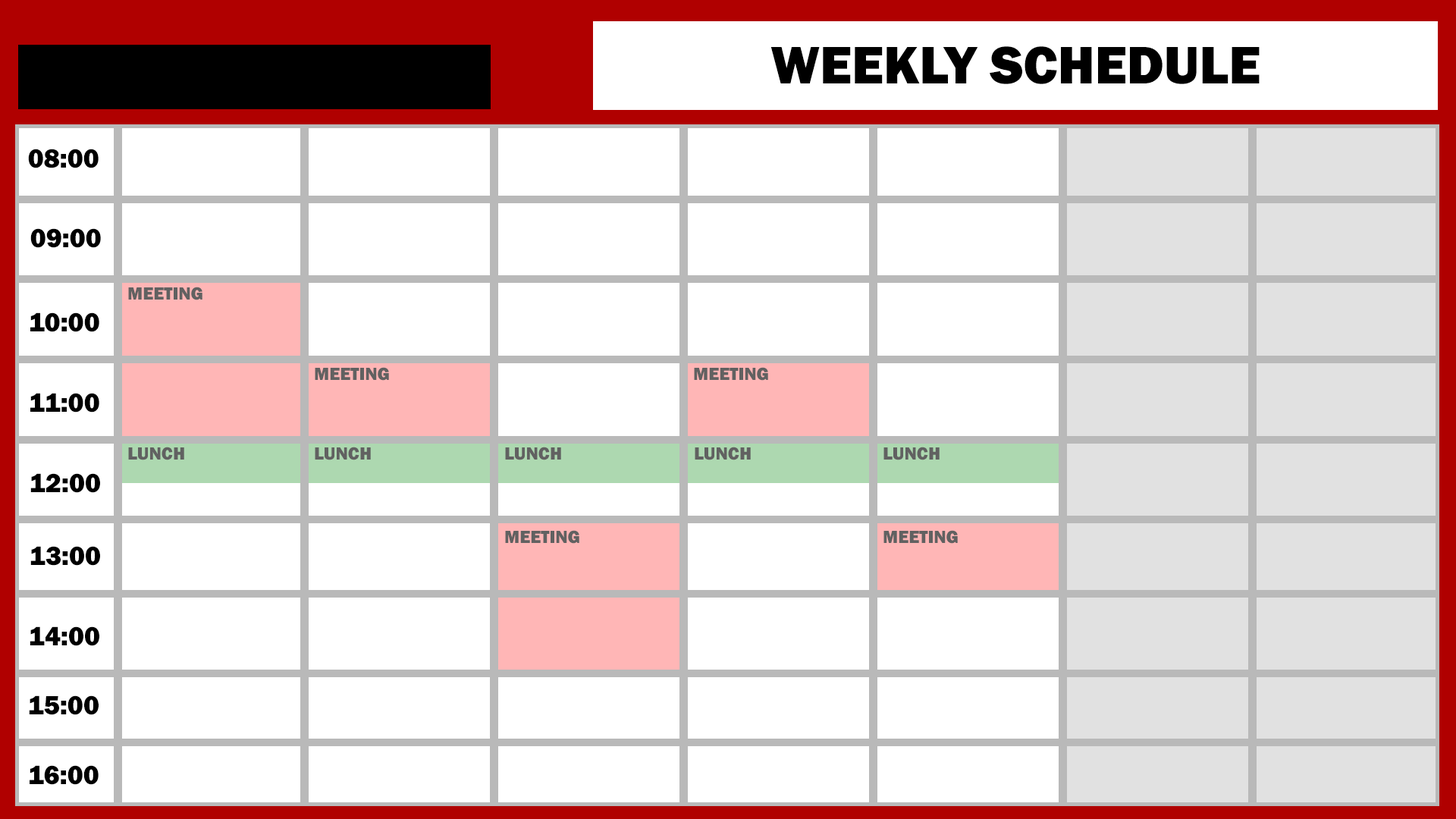
<style>
.page{position:relative;width:1456px;height:819px;background:#ffffff}
.page>*{position:absolute;margin:0}
.t1{font:54.6px "FranklinGothic-Heavy";color:#000000}
.t2{font:27.3px "FranklinGothic-Heavy";color:#000000}
.t3{font:18.2px "FranklinGothic-Heavy";color:#616161}
</style>
<div class="page">
<p class="t1" style="left:770px;top:46px;width:490px;height:38px">WEEKLY SCHEDULE</p>
<p class="t2" style="left:28px;top:149px;width:71px;height:19px">08:00</p>
<p class="t2" style="left:30px;top:228px;width:71px;height:20px">09:00</p>
<p class="t3" style="left:128px;top:287px;width:74px;height:13px">MEETING</p>
<p class="t2" style="left:30px;top:312px;width:69px;height:20px">10:00</p>
<p class="t3" style="left:315px;top:367px;width:74px;height:14px">MEETING</p>
<p class="t3" style="left:694px;top:367px;width:74px;height:14px">MEETING</p>
<p class="t2" style="left:30px;top:393px;width:69px;height:20px">11:00</p>
<p class="t3" style="left:128px;top:447px;width:56px;height:13px">LUNCH</p>
<p class="t3" style="left:315px;top:447px;width:56px;height:13px">LUNCH</p>
<p class="t3" style="left:505px;top:447px;width:56px;height:13px">LUNCH</p>
<p class="t3" style="left:695px;top:447px;width:56px;height:13px">LUNCH</p>
<p class="t3" style="left:883px;top:447px;width:57px;height:13px">LUNCH</p>
<p class="t2" style="left:30px;top:473px;width:70px;height:20px">12:00</p>
<p class="t3" style="left:505px;top:530px;width:74px;height:14px">MEETING</p>
<p class="t3" style="left:883px;top:530px;width:75px;height:14px">MEETING</p>
<p class="t2" style="left:30px;top:546px;width:70px;height:20px">13:00</p>
<p class="t2" style="left:30px;top:626px;width:69px;height:20px">14:00</p>
<p class="t2" style="left:29px;top:695px;width:70px;height:20px">15:00</p>
<p class="t2" style="left:30px;top:765px;width:69px;height:20px">16:00</p>
</div>
